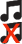
<style>
.page{position:relative;width:22px;height:44px;background:#ffffff}
.page>*{position:absolute;margin:0}
.t1{font:40px "MyriadPro-Regular";color:#f12e0e}
</style>
<div class="page">
<p class="t1" style="left:2px;top:23px;width:18px;height:20px">x</p>
</div>
